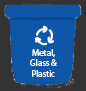
<style>
.page{position:relative;width:86px;height:91px;background:#0e56a8}
.page>*{position:absolute;margin:0}
.t1{font:9px "MyriadPro-Regular";color:#ffffff}
</style>
<div class="page">
<p class="t1" style="left:30px;top:49px;width:27px;height:28px;text-align:center">Metal,<br>Glass &amp;<br>Plastic</p>
</div>
